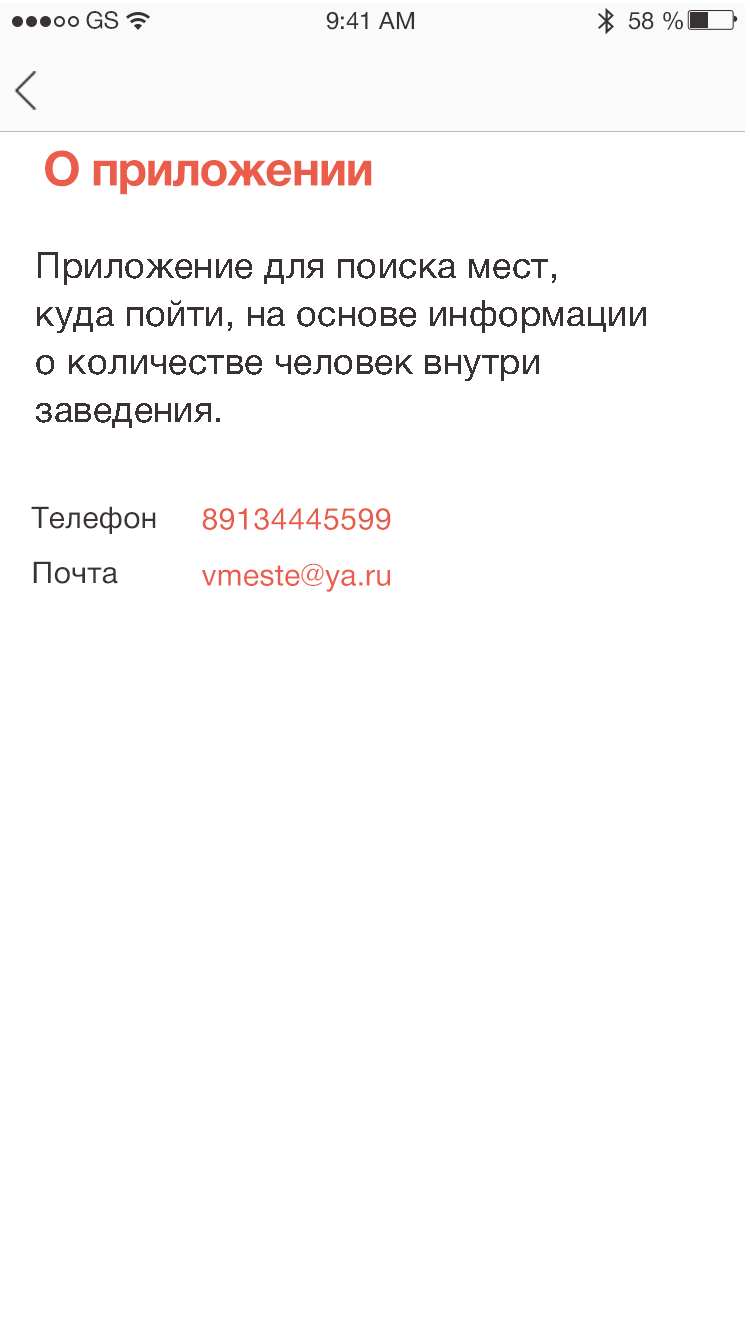
<style>
.page{position:relative;width:750px;height:1335px;background:#ffffff}
.page>*{position:absolute;margin:0}
.t1{font:24px "HelveticaNeueCyr-Roman";color:#383234}
.t2{font:48px "HelveticaNeueCyr-Bold";letter-spacing:-0.024em;color:#ea5d4b}
.t3{font:36px/48px "HelveticaNeueCyr-Roman";letter-spacing:0.012em;color:#383234}
.t4{font:30px "HelveticaNeueCyr-Roman";letter-spacing:0.012em;color:#393335}
.t5{font:30px "HelveticaNeueCyr-Roman";letter-spacing:0.012em;color:#e85b49}
.t6{font:30px "HelveticaNeueCyr-Roman";letter-spacing:0.012em;color:#ea5d4b}
</style>
<div class="page">
<p class="t1" style="left:86px;top:11px;width:33px;height:18px">GS</p>
<p class="t1" style="left:326px;top:11px;width:89px;height:19px">9:41 AM</p>
<p class="t1" style="left:628px;top:11px;width:55px;height:19px">58 %</p>
<p class="t2" style="left:45px;top:150px;width:327px;height:45px">О приложении</p>
<p class="t3" style="left:36px;top:252px;width:610px;height:176px">Приложение для поиска мест, куда пойти, на основе информации о количестве человек внутри заведения.</p>
<p class="t4" style="left:31px;top:506px;width:125px;height:28px">Телефон</p>
<p class="t5" style="left:202px;top:508px;width:189px;height:22px">89134445599</p>
<p class="t4" style="left:33px;top:561px;width:85px;height:23px">Почта</p>
<p class="t6" style="left:202px;top:563px;width:188px;height:29px">vmeste@ya.ru</p>
</div>
